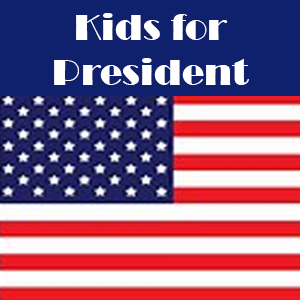
<style>
.page{position:relative;width:300px;height:300px;background:#0f216d}
.page>*{position:absolute;margin:0}
.t1{font:37.5px "Broadway";color:#ffffff}
</style>
<div class="page">
<p class="t1" style="left:54px;top:13px;width:195px;height:72px;text-align:center">Kids for<br>President</p>
</div>
